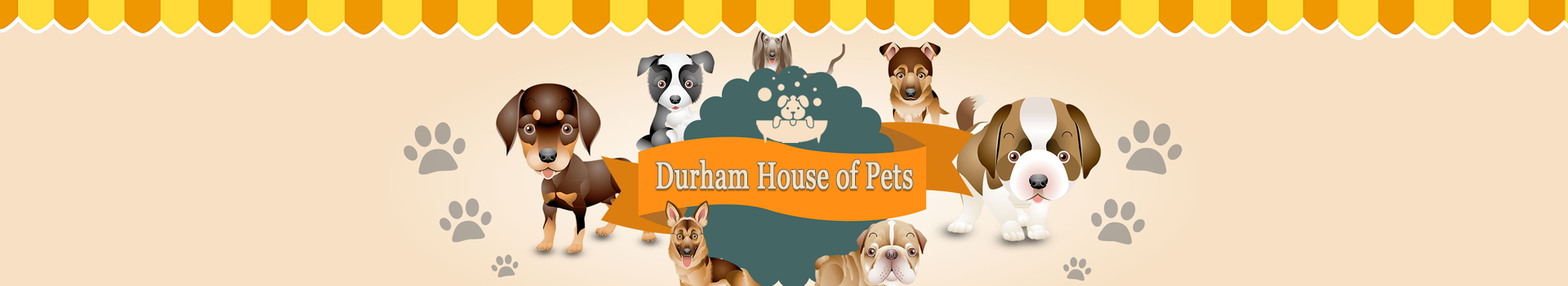
<style>
.page{position:relative;width:1568px;height:286px;background:#f8e0c4}
.page>*{position:absolute;margin:0}
.t1{font:37.1px "Georgia";color:#f8e0c4;font-weight:bold;scale:0.66 1}
</style>
<div class="page">
<p class="t1" style="left:656px;top:159px;width:257px;height:30px">Durham House of Pets</p>
</div>
